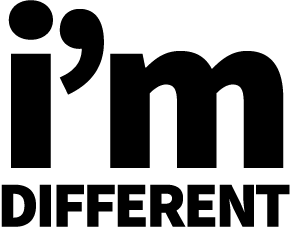
<style>
.page{position:relative;width:290px;height:228px;background:#ffffff}
.page>*{position:absolute;margin:0}
.t1{font:64.4px/58.7px "SourceSansPro-Black";letter-spacing:-0.05em;color:#000000;text-transform:uppercase}
.t2{font:228.4px/58.7px "SourceSansPro-Black";letter-spacing:-0.05em;color:#000000}
</style>
<div class="page">
<p class="t1" style="left:1px;top:0px;width:289px;height:227px;text-align:justify"><span class="t2">i’m<br></span>different</p>
<p class="t1" style="left:1px;top:0px;width:289px;height:227px;text-align:justify"><span class="t2">i’m<br></span>different</p>
</div>
